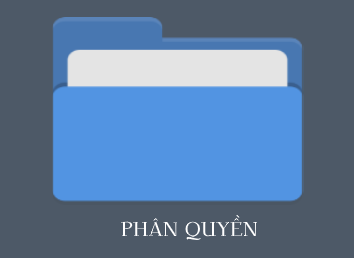
<style>
.page{position:relative;width:354px;height:258px;background:#4d5967}
.page>*{position:absolute;margin:0}
.t1{font:20px "DehutiAlt-Bold";color:#ffffff}
</style>
<div class="page">
<p class="t1" style="left:121px;top:215px;width:136px;height:26px">PHÂN QUYỀN</p>
</div>
